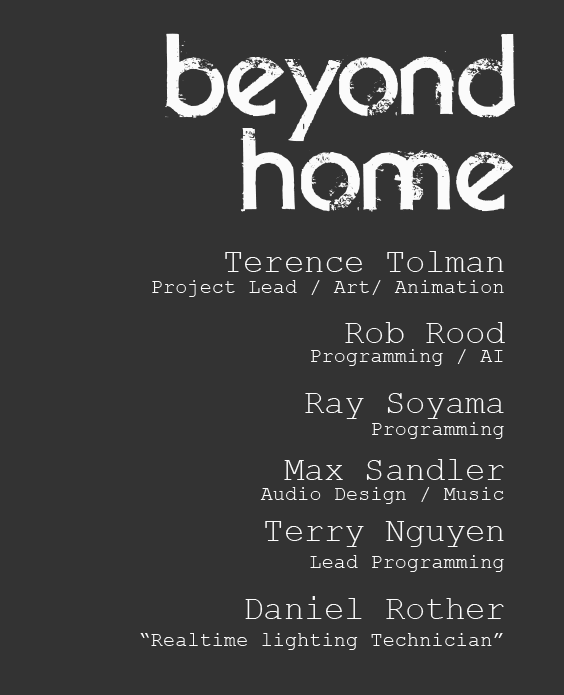
<style>
.page{position:relative;width:564px;height:695px;background:#333333}
.page>*{position:absolute;margin:0}
.t1{font:163px/94.6px "BeyondSky-trial";color:#fbfbfb}
.t2{font:33.6px "CourierNewPSMT";color:#fbfbfb}
.t3{font:20.3px "CourierNewPSMT";color:#fbfbfb}
</style>
<div class="page">
<p class="t1" style="left:165px;top:33px;width:350px;height:179px;text-align:right">beyond<br>home</p>
<p class="t2" style="left:225px;top:251px;width:279px;height:21px">Terence Tolman</p>
<p class="t3" style="left:152px;top:280px;width:352px;height:17px">Project Lead / Art/ Animation</p>
<p class="t2" style="left:345px;top:322px;width:160px;height:21px">Rob Rood</p>
<p class="t3" style="left:311px;top:349px;width:192px;height:17px">Programming / AI</p>
<p class="t2" style="left:305px;top:393px;width:199px;height:26px">Ray Soyama</p>
<p class="t3" style="left:372px;top:422px;width:132px;height:17px">Programming</p>
<p class="t2" style="left:284px;top:459px;width:220px;height:21px">Max Sandler</p>
<p class="t3" style="left:260px;top:487px;width:244px;height:17px">Audio Design / Music</p>
<p class="t2" style="left:265px;top:521px;width:239px;height:26px">Terry Nguyen</p>
<p class="t3" style="left:310px;top:555px;width:194px;height:17px">Lead Programming</p>
<p class="t2" style="left:245px;top:596px;width:259px;height:23px">Daniel Rother</p>
<p class="t3" style="left:140px;top:633px;width:363px;height:17px">“Realtime lighting Technician”</p>
</div>
